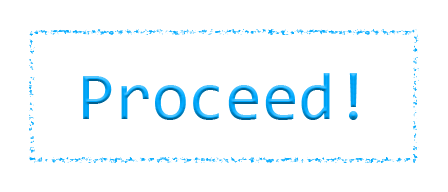
<style>
.page{position:relative;width:448px;height:192px;background:#ffffff}
.page>*{position:absolute;margin:0}
.t1{font:66.7px "Consolas"}
</style>
<div class="page">
<p class="t1" style="left:83px;top:73px;width:275px;height:47px">Proceed!</p>
</div>
